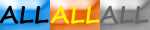
<style>
.page{position:relative;width:150px;height:30px}
.page>*{position:absolute;margin:0}
.t1{font:23.9px "SegoePrint-Bold";color:#000000}
.t2{font:23.9px "SegoePrint-Bold";color:#fff100}
.t3{font:23.9px "SegoePrint-Bold";color:#666666}
</style>
<div class="page">
<p class="t1" style="left:0px;top:5px;width:49px;height:19px">ALL</p>
<p class="t2" style="left:50px;top:5px;width:50px;height:19px">ALL</p>
<p class="t3" style="left:99px;top:5px;width:50px;height:19px">ALL</p>
</div>
